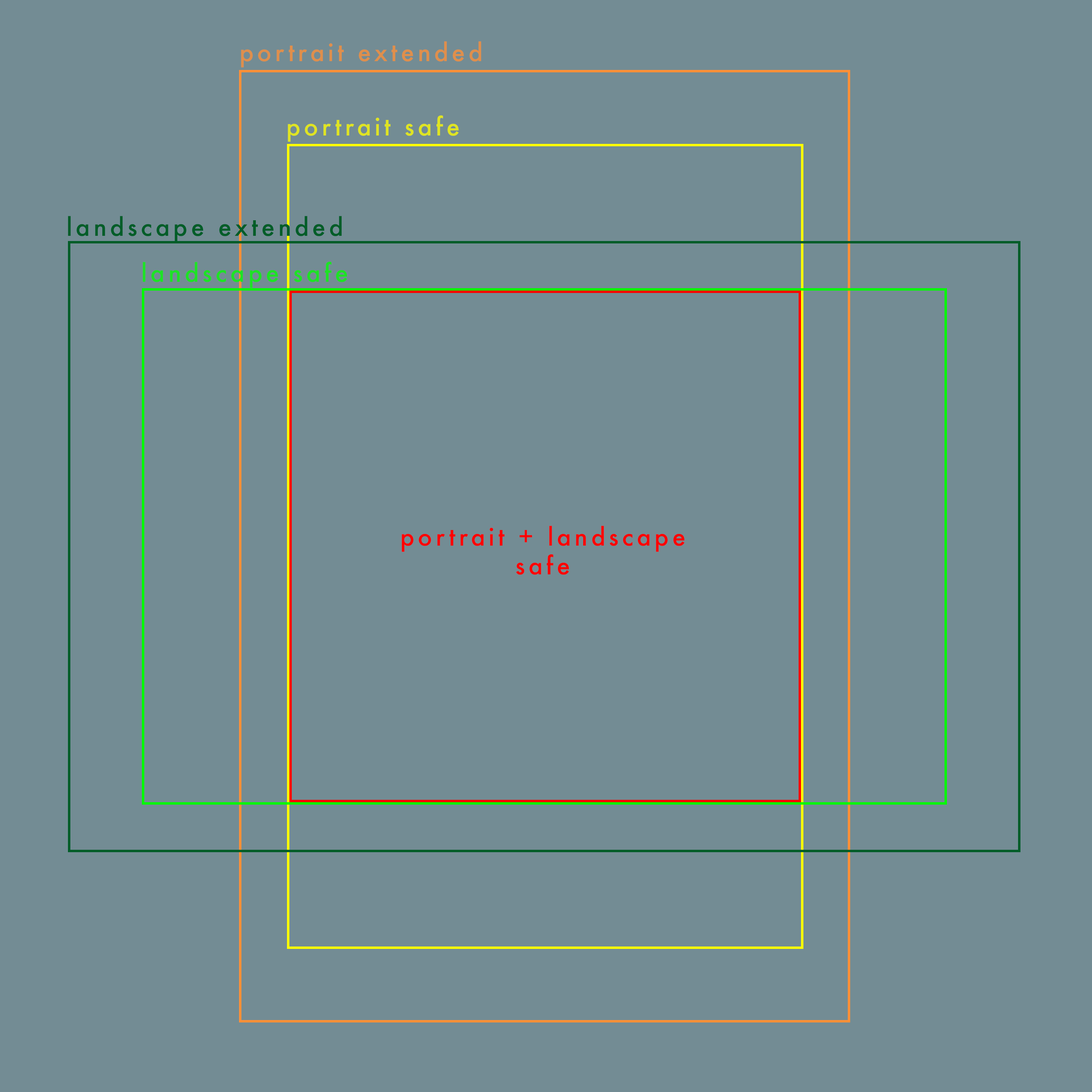
<style>
.page{position:relative;width:1092px;height:1092px;background:#738c94}
.page>*{position:absolute;margin:0}
.t1{font:24px "Futura-Medium";letter-spacing:0.14em;color:#df8f4c}
.t2{font:24px "Futura-Medium";letter-spacing:0.14em;color:#dfe422}
.t3{font:24px "Futura-Medium";letter-spacing:0.14em;color:#005d28}
.t4{font:24px "Futura-Medium";letter-spacing:0.14em;color:#1de225}
.t5{font:24px "Futura-Medium";letter-spacing:0.14em;color:#ff0000}
</style>
<div class="page">
<p class="t1" style="left:241px;top:41px;width:240px;height:27px">portrait extended</p>
<p class="t2" style="left:288px;top:115px;width:171px;height:27px">portrait safe</p>
<p class="t3" style="left:68px;top:216px;width:274px;height:26px">landscape extended</p>
<p class="t4" style="left:143px;top:261px;width:204px;height:27px">landscape safe</p>
<p class="t5" style="left:402px;top:526px;width:283px;height:49px;text-align:center">portrait + landscape<br>safe</p>
</div>
